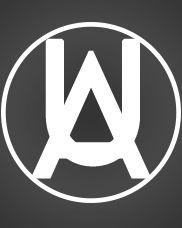
<style>
.page{position:relative;width:182px;height:228px;background:#ffffff}
.page>*{position:absolute;margin:0}
.t1{font:154.2px "LEMONMILK-Light";letter-spacing:-0.025em;color:#ffffff;font-weight:bold}
</style>
<div class="page">
<p class="t1" style="left:45px;top:38px;width:95px;height:129px">U</p>
<p class="t1" style="left:32px;top:50px;width:118px;height:129px">A</p>
</div>
